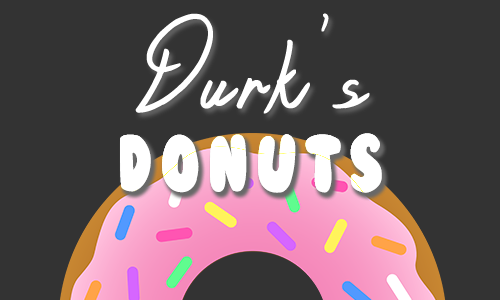
<style>
.page{position:relative;width:500px;height:300px;background:#333333}
.page>*{position:absolute;margin:0}
.t1{font:88px "SilentReaction";letter-spacing:0.125em;color:#ffffff;scale:0.84 1}
.t2{font:74px "BubbleGum";letter-spacing:0.125em;color:#ffffff;scale:0.84 1}
</style>
<div class="page">
<p class="t1" style="left:135px;top:13px;width:235px;height:101px">Durk’s</p>
<p class="t2" style="left:120px;top:133px;width:262px;height:60px">donuts</p>
<p class="t2" style="left:120px;top:133px;width:262px;height:60px">donuts</p>
<p class="t2" style="left:120px;top:133px;width:262px;height:60px">donuts</p>
</div>
